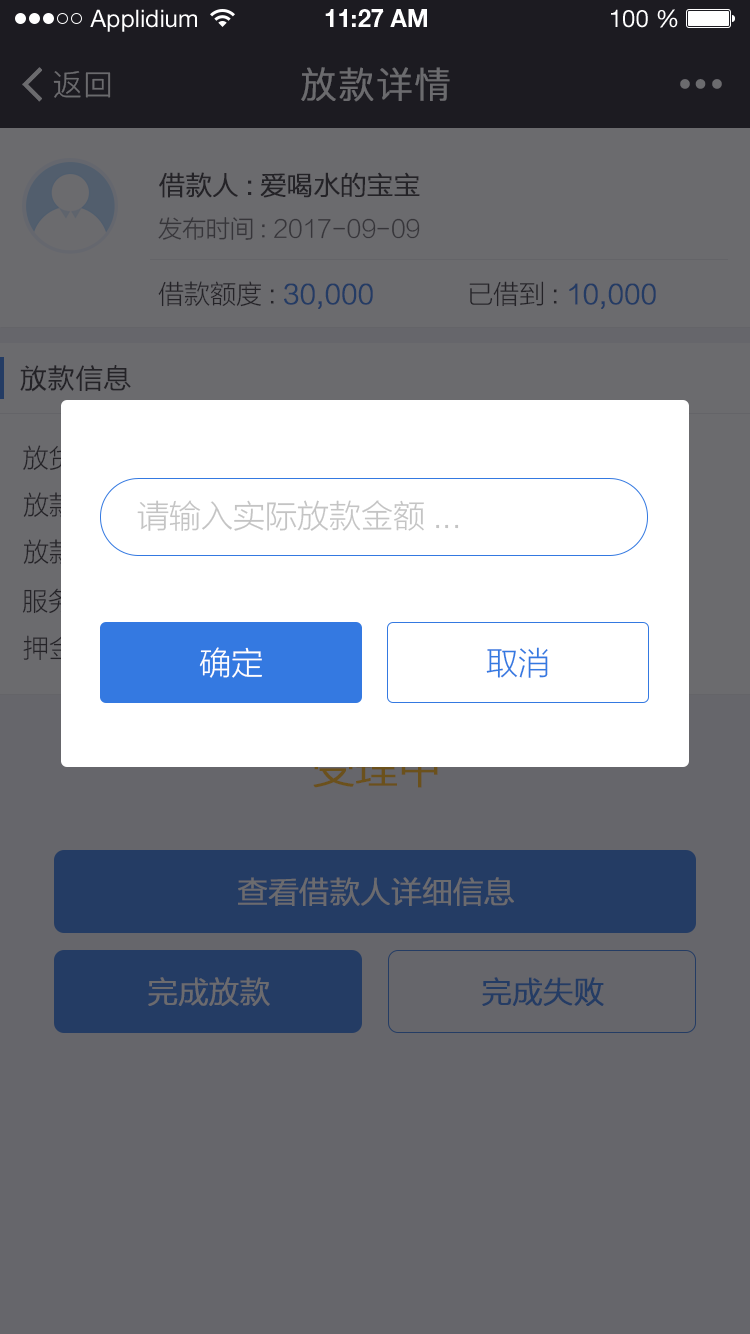
<style>
.page{position:relative;width:750px;height:1334px;background:#66666b}
.page>*{position:absolute;margin:0}
.t1{font:24px "HelveticaNeueLTStd-Roman";color:#ffffff}
.t2{font:24px "HelveticaNeueLTStd-Bd";color:#ffffff}
.t3{font:30px "PingFang-SC-Regular";letter-spacing:0.025em;color:#6b6b6e}
.t4{font:36px "PingFang-SC-Regular";letter-spacing:0.025em;color:#6b6b6e;font-weight:bold}
.t5{font:26px "FZLTXHK--GBK1-0";color:#333333;font-weight:bold}
.t6{font:24px "FZLTXHK--GBK1-0";color:#363539}
.t7{font:26px "FZLTXHK--GBK1-0";font-weight:bold}
.t8{font:26px "FZLTXHK--GBK1-0"}
.t9{font:28px "FZLTH_YS_GBK";color:#333333}
.t10{font:32px "FZLTXHK--GBK1-0";color:#c4c4c4}
.t11{font:32px "FZLTXHK--GBK1-0";color:#ffffff}
.t12{font:32px "FZLTXHK--GBK1-0";color:#3479e1}
.t13{font:30px "FZLTXHK--GBK1-0";color:#6b6b6e;font-weight:bold}
.t14{font:30px "FZLTXHK--GBK1-0";color:#243c64;font-weight:bold}
</style>
<div class="page">
<p class="t1" style="left:90px;top:9px;width:107px;height:23px">Applidium</p>
<p class="t2" style="left:325px;top:9px;width:102px;height:18px">11:27 AM</p>
<p class="t1" style="left:611px;top:9px;width:67px;height:19px">100 %</p>
<p class="t3" style="left:53px;top:71px;width:58px;height:27px">返回</p>
<p class="t4" style="left:301px;top:67px;width:149px;height:35px">放款详情</p>
<p class="t5" style="left:159px;top:172px;width:261px;height:26px">借款人:爱喝水的宝宝</p>
<p class="t6" style="left:158px;top:217px;width:262px;height:23px">发布时间: 2017-09-09</p>
<p class="t7" style="left:158px;top:281px;width:215px;height:28px"><span class="t8">借款额度: </span>30,000</p>
<p class="t7" style="left:469px;top:281px;width:187px;height:28px"><span class="t8">已借到: </span>10,000</p>
<p class="t9" style="left:20px;top:365px;width:111px;height:27px">放款信息</p>
<p class="t10" style="left:137px;top:500px;width:322px;height:31px">请输入实际放款金额...</p>
<p class="t11" style="left:199px;top:647px;width:63px;height:31px">确定</p>
<p class="t12" style="left:486px;top:647px;width:62px;height:31px">取消</p>
<p class="t13" style="left:238px;top:877px;width:276px;height:29px">查看借款人详细信息</p>
<p class="t13" style="left:148px;top:977px;width:122px;height:29px">完成放款</p>
<p class="t14" style="left:482px;top:977px;width:122px;height:29px">完成失败</p>
</div>
